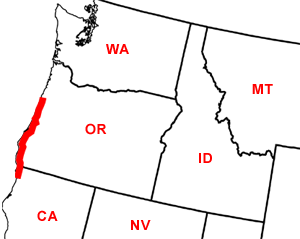
<style>
.page{position:relative;width:300px;height:239px;background:#ffffff}
.page>*{position:absolute;margin:0}
.t1{font:14px "Arial-BoldMT";letter-spacing:0.05em;color:#ff0000}
</style>
<div class="page">
<p class="t1" style="left:106px;top:44px;width:23px;height:10px">WA</p>
<p class="t1" style="left:252px;top:84px;width:21px;height:10px">MT</p>
<p class="t1" style="left:85px;top:123px;width:22px;height:12px">OR</p>
<p class="t1" style="left:199px;top:153px;width:13px;height:10px">ID</p>
<p class="t1" style="left:37px;top:210px;width:21px;height:11px">CA</p>
<p class="t1" style="left:131px;top:220px;width:20px;height:10px">NV</p>
</div>
